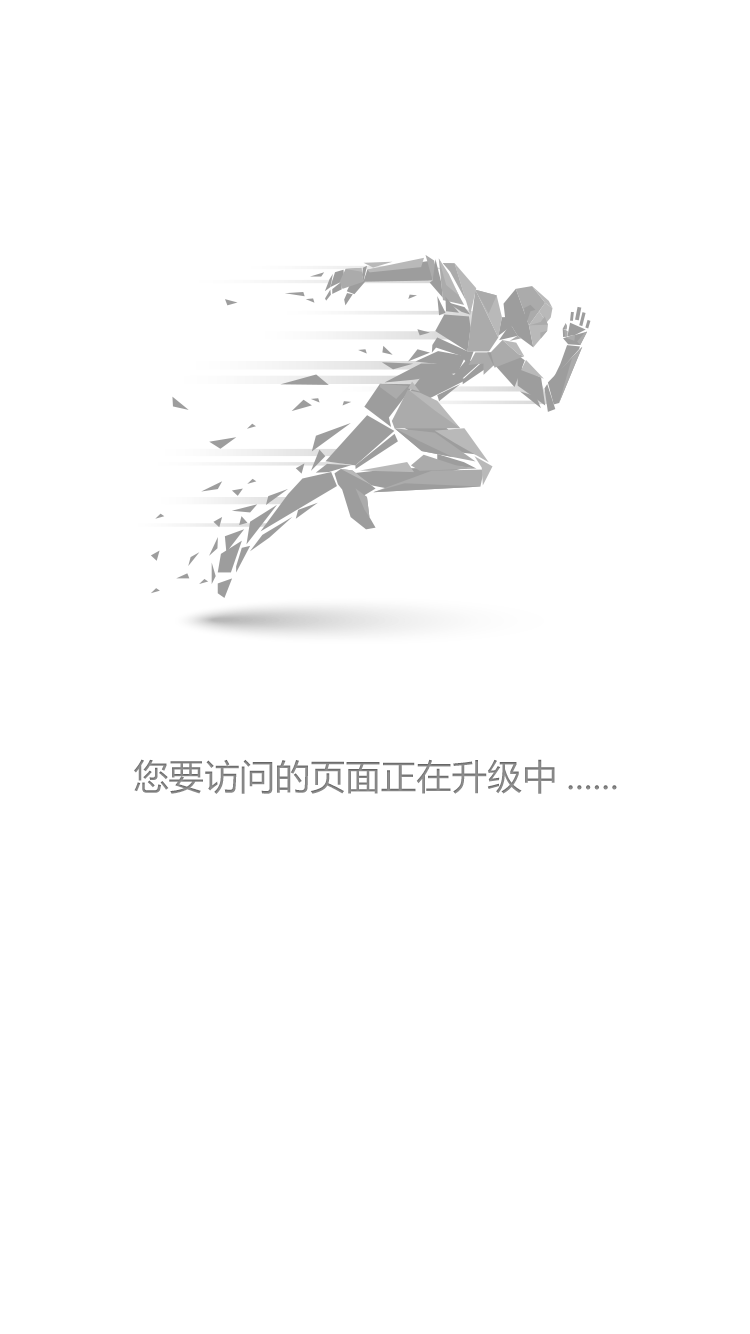
<style>
.page{position:relative;width:750px;height:1334px;background:#ffffff}
.page>*{position:absolute;margin:0}
.t1{font:35px "MicrosoftYaHei";letter-spacing:0.01em;color:#8f8f8f}
</style>
<div class="page">
<p class="t1" style="left:134px;top:759px;width:483px;height:35px">您要访问的页面正在升级中......</p>
</div>
